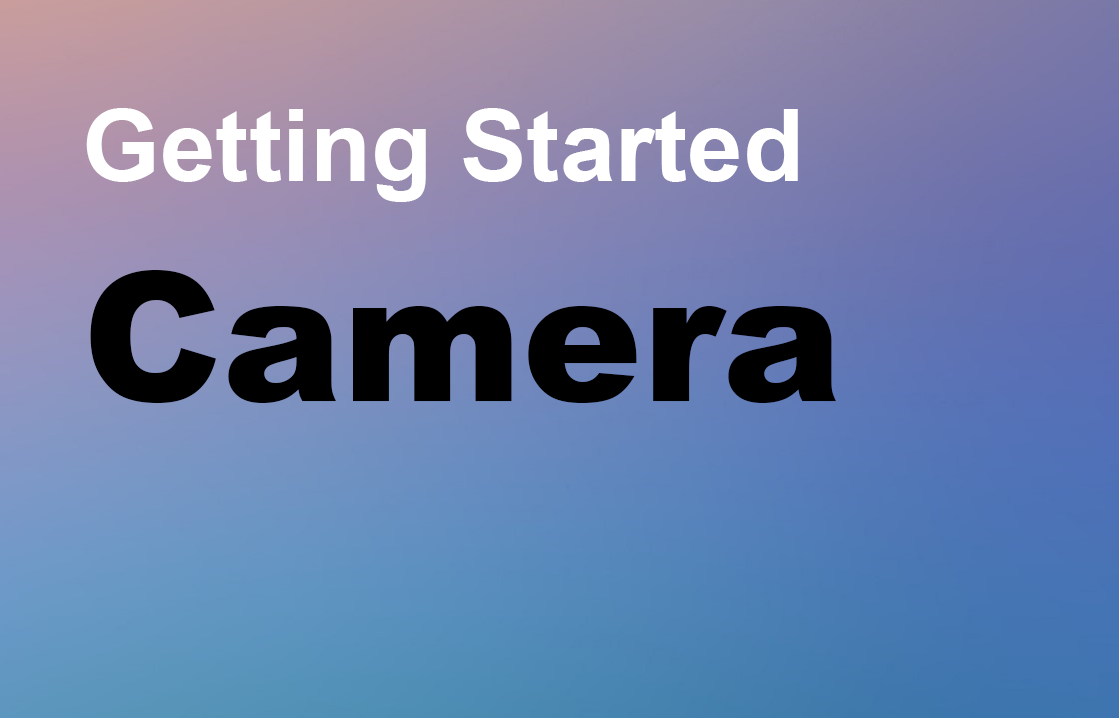
<style>
.page{position:relative;width:1119px;height:718px}
.page>*{position:absolute;margin:0}
.t1{font:100px "Arial-BoldMT";color:#ffffff}
.t2{font:180px "Arial-Black";color:#000000}
</style>
<div class="page">
<p class="t1" style="left:86px;top:108px;width:712px;height:94px">Getting Started</p>
<p class="t2" style="left:90px;top:270px;width:746px;height:133px">Camera<br><br>dasd</p>
</div>
